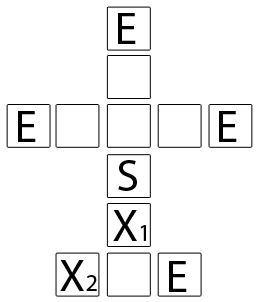
<style>
.page{position:relative;width:259px;height:302px;background:#ffffff}
.page>*{position:absolute;margin:0}
.t1{font:45.8px "MyriadPro-Regular";color:#000000}
.t2{font:24px "MyriadPro-Regular";color:#000000}
</style>
<div class="page">
<p class="t1" style="left:118px;top:13px;width:18px;height:31px">E</p>
<p class="t1" style="left:18px;top:111px;width:18px;height:31px">E</p>
<p class="t1" style="left:219px;top:111px;width:18px;height:31px">E</p>
<p class="t1" style="left:118px;top:160px;width:19px;height:31px">S</p>
<p class="t1" style="left:113px;top:210px;width:33px;height:31px">X<span class="t2">1</span></p>
<p class="t1" style="left:60px;top:260px;width:37px;height:31px">X<span class="t2">2</span></p>
<p class="t1" style="left:169px;top:261px;width:18px;height:31px">E</p>
</div>
